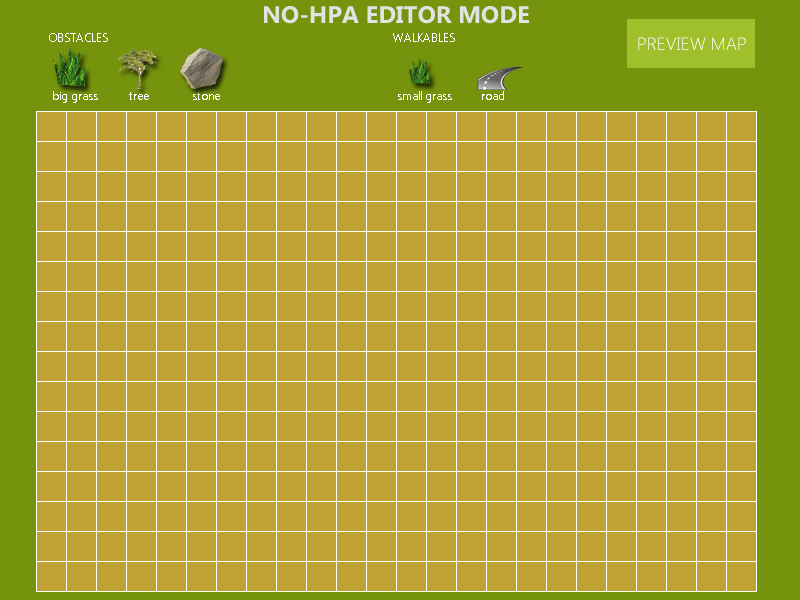
<style>
.page{position:relative;width:800px;height:600px;background:#c0a133}
.page>*{position:absolute;margin:0}
.t1{font:24px "SegoeUI-Bold";color:#e2e2e2}
.t2{font:12px "SegoeUI-Light";color:#fffefe}
.t3{font:18px "SegoeUI-Light";color:#ffffff}
</style>
<div class="page">
<p class="t1" style="left:264px;top:6px;width:265px;height:18px">NO-HPA EDITOR MODE</p>
<p class="t2" style="left:49px;top:33px;width:59px;height:9px">OBSTACLES</p>
<p class="t2" style="left:393px;top:33px;width:62px;height:9px">WALKABLES</p>
<p class="t3" style="left:638px;top:37px;width:108px;height:13px">PREVIEW MAP</p>
<p class="t2" style="left:53px;top:91px;width:45px;height:12px">big grass</p>
<p class="t2" style="left:129px;top:92px;width:20px;height:8px">tree</p>
<p class="t2" style="left:193px;top:92px;width:27px;height:8px">stone</p>
<p class="t2" style="left:398px;top:91px;width:54px;height:12px">small grass</p>
<p class="t2" style="left:482px;top:91px;width:22px;height:9px">road</p>
</div>
